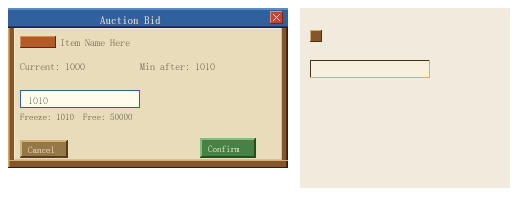
<style>
.page{position:relative;width:520px;height:220px;background:#f0ebdc}
.page>*{position:absolute;margin:0}
.t1{font:11px "SimSun"}
.t2{font:10px "SimSun"}
.t3{font:9px "SimSun"}
</style>
<div class="page">
<p class="t1" style="left:100px;top:16px;width:61px;height:8px">Auction Bid</p>
<p class="t2" style="left:61px;top:39px;width:69px;height:7px">Item Name Here</p>
<p class="t2" style="left:20px;top:63px;width:65px;height:7px">Current: 1000</p>
<p class="t2" style="left:140px;top:63px;width:75px;height:7px">Min after: 1010</p>
<p class="t2" style="left:29px;top:97px;width:19px;height:7px">1010</p>
<p class="t3" style="left:20px;top:113px;width:112px;height:7px">Freeze: 1010  Free: 50000</p>
<p class="t3" style="left:28px;top:146px;width:27px;height:7px">Cancel</p>
<p class="t3" style="left:208px;top:145px;width:32px;height:7px">Confirm</p>
</div>
